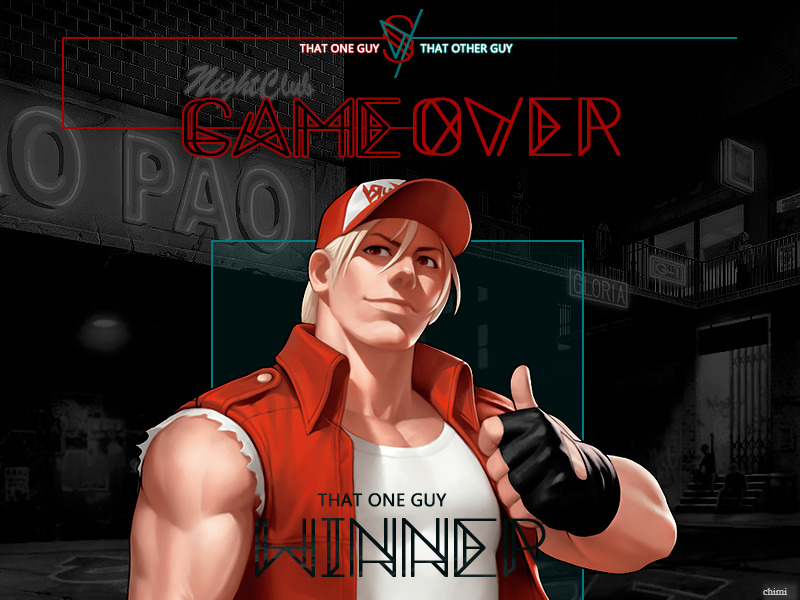
<style>
.page{position:relative;width:800px;height:600px;background:#000000}
.page>*{position:absolute;margin:0}
.t1{font:11px "MicrosoftPhagsPa";color:#ffffff;font-weight:bold}
.t2{font:72px "Metrica-Regular";color:#000000;font-weight:bold}
.t3{font:75px "Metrica-Regular";color:#a20404;font-weight:bold}
.t4{font:10px "CalistoMT";color:#c7c7c7}
</style>
<div class="page">
<p class="t1" style="left:299px;top:44px;width:81px;height:9px">THAT ONE GUY</p>
<p class="t1" style="left:420px;top:44px;width:93px;height:9px">THAT OTHER GUY</p>
<p class="t2" style="left:184px;top:99px;width:215px;height:57px">GAME</p>
<p class="t3" style="left:413px;top:97px;width:208px;height:59px">OVER</p>
<p class="t4" style="left:763px;top:588px;width:24px;height:7px">chimi</p>
</div>
